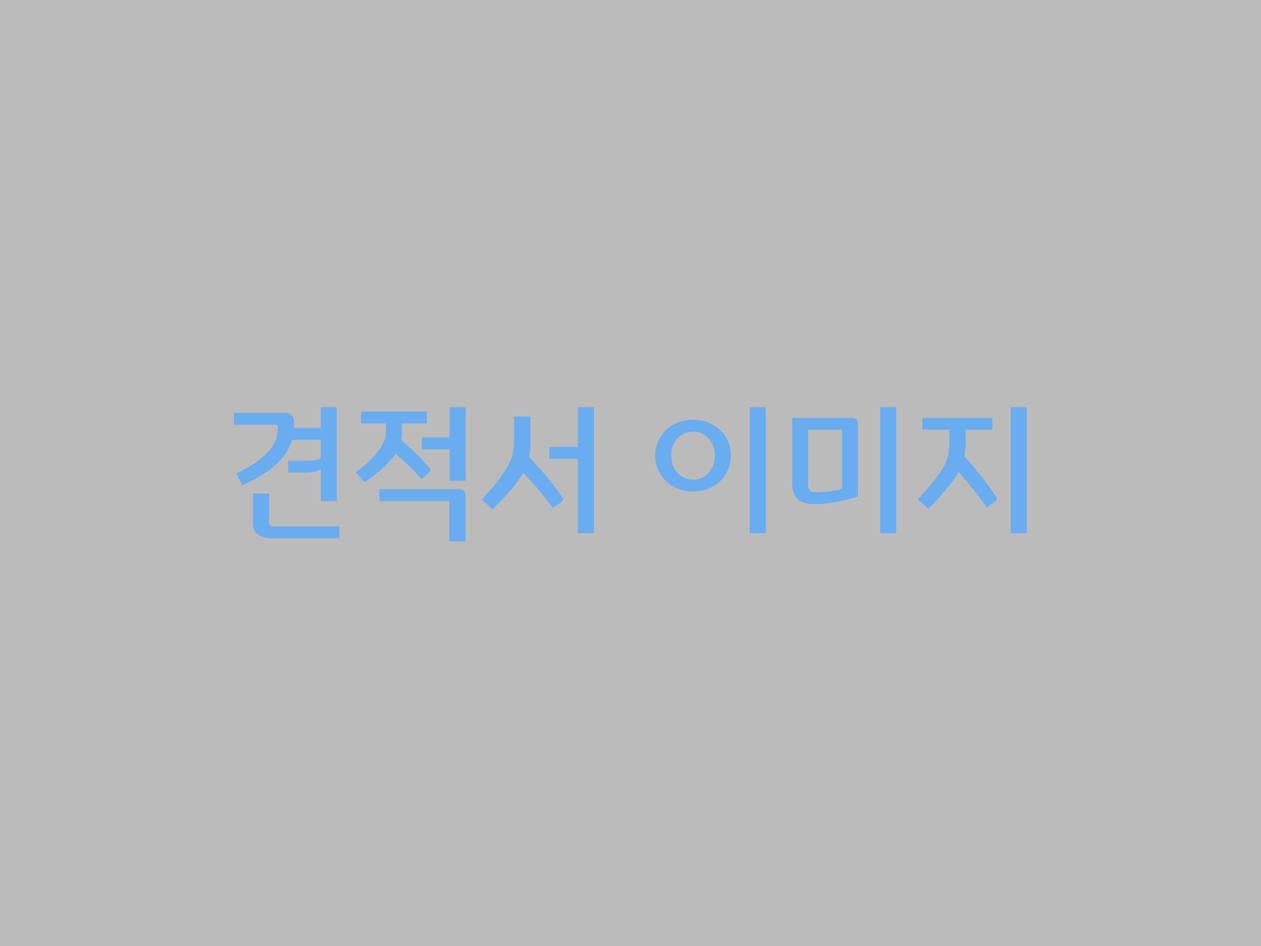
<style>
.page{position:relative;width:1261px;height:946px;background:#bbbbbb}
.page>*{position:absolute;margin:0}
.t1{font:146.8px "KBFGDisplay-Medium";letter-spacing:-0.02em;color:#6aacf0;font-weight:bold}
</style>
<div class="page">
<p class="t1" style="left:234px;top:407px;width:793px;height:135px">견적서 이미지</p>
</div>
